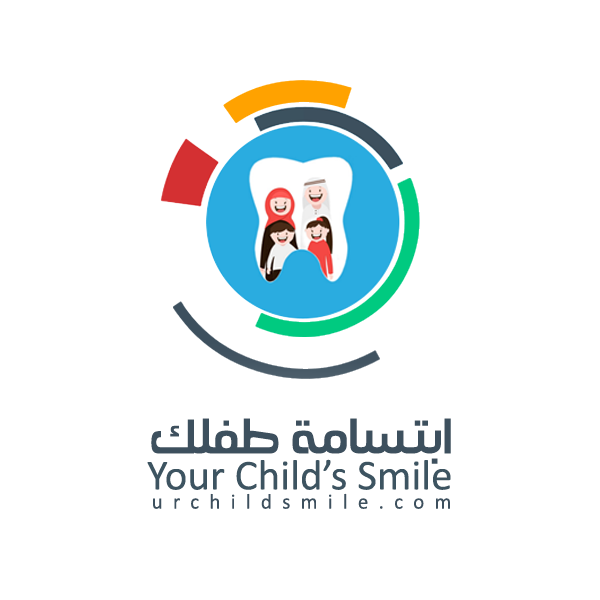
<style>
.page{position:relative;width:600px;height:600px;background:#ffffff}
.page>*{position:absolute;margin:0}
.t1{font:70.6px "AraHamah1964B-Bold";color:#3d505e}
.t2{font:43px "Calibri";color:#3d5461}
.t3{font:21.5px "Calibri";letter-spacing:0.485em;color:#3d505e}
</style>
<div class="page">
<p class="t1" style="left:151px;top:418px;width:300px;height:46px">ابتسامة طفلك</p>
<p class="t2" style="left:147px;top:459px;width:304px;height:31px">Your Child’s Smile</p>
<p class="t3" style="left:153px;top:493px;width:297px;height:16px">urchildsmile.com</p>
</div>
